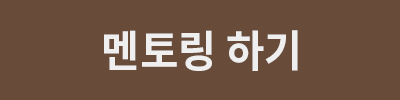
<style>
.page{position:relative;width:400px;height:100px;background:#684b39}
.page>*{position:absolute;margin:0}
.t1{font:43.7px "NotoSansCJKkr-Bold";color:#efefef;scale:0.95 1}
</style>
<div class="page">
<p class="t1" style="left:104px;top:30px;width:194px;height:41px">멘토링 하기</p>
</div>
